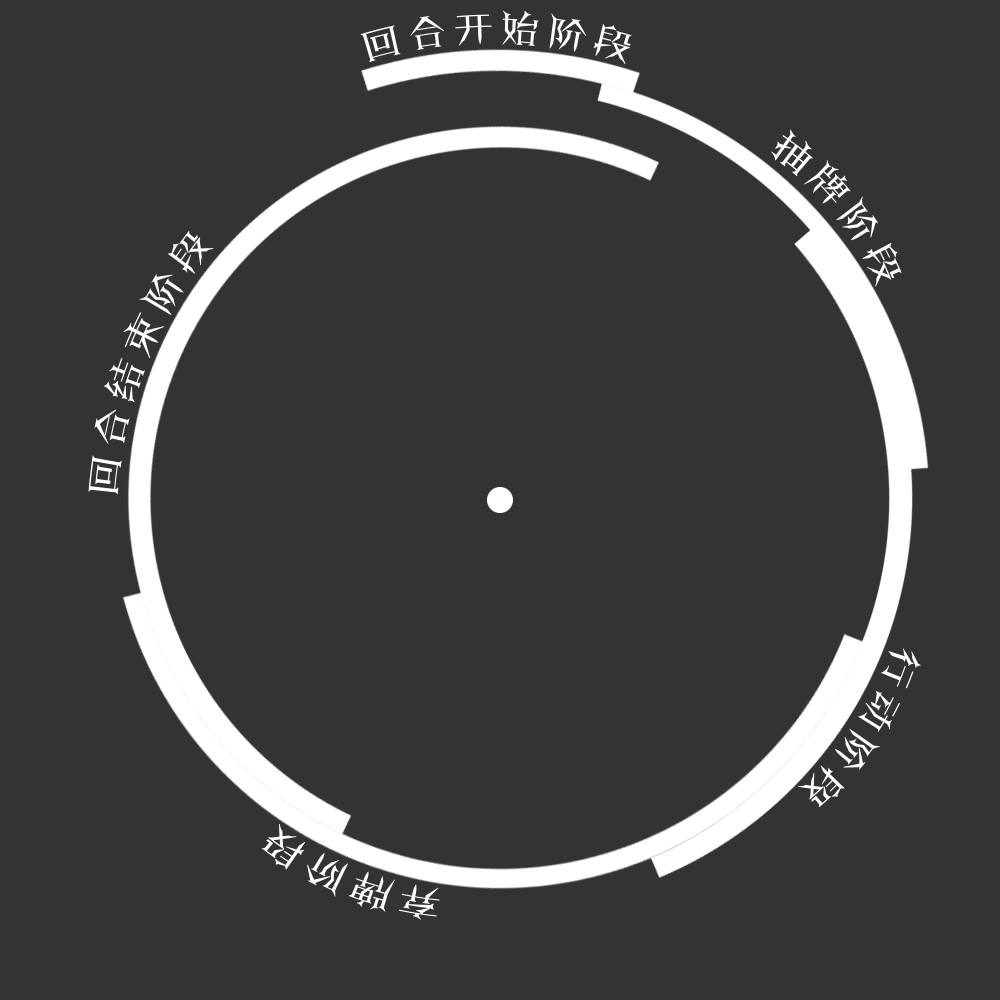
<style>
.page{position:relative;width:1000px;height:1000px;background:#333333}
.page>*{position:absolute;margin:0}
.t1{font:37.5px "FZJTJW--GB1-0";letter-spacing:0.18em;color:#ffffff;text-transform:uppercase}
.t2{font:38px "FZJTJW--GB1-0";letter-spacing:0.18em;color:#ffffff;text-transform:uppercase}
</style>
<div class="page">
<p class="t1" style="left:360px;top:10px;width:272px;height:55px;rotate:1deg">回合开始阶段</p>
<p class="t1" style="left:771px;top:129px;width:131px;height:158px;rotate:52deg">抽牌阶段</p>
<p class="t2" style="left:88px;top:230px;width:126px;height:265px;rotate:-68deg">回合结束阶段</p>
<p class="t2" style="left:261px;top:823px;width:179px;height:97px;rotate:-158deg">弃牌阶段</p>
</div>
